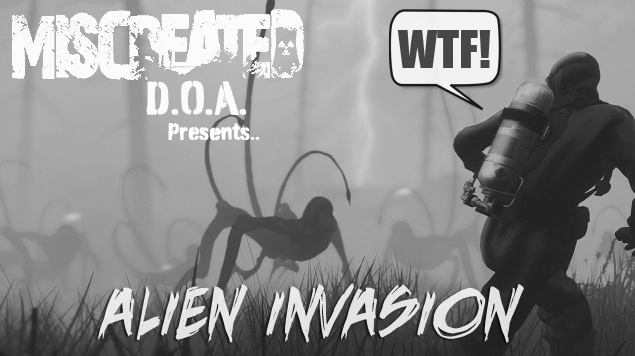
<style>
.page{position:relative;width:635px;height:356px}
.page>*{position:absolute;margin:0}
.t1{font:48px "Impact";color:#474747}
.t2{font:48px "BurnabyStencil-Regular";color:#fbfbfb}
.t3{font:24px "BurnabyStencil-Regular";color:#ffffff}
.t4{font:85px "DeathRattleBB";color:#f7f6f6}
</style>
<div class="page">
<p class="t1" style="left:397px;top:30px;width:94px;height:38px">WTF!</p>
<p class="t2" style="left:146px;top:80px;width:101px;height:36px">D.O.A.</p>
<p class="t3" style="left:168px;top:123px;width:92px;height:18px">Presents..</p>
<p class="t4" style="left:98px;top:283px;width:426px;height:60px;opacity:0.9">ALIEN INVASION</p>
</div>
